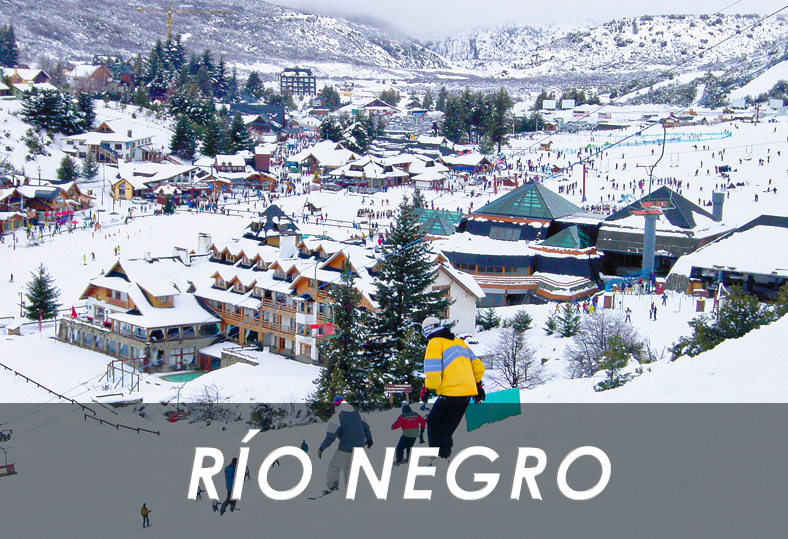
<style>
.page{position:relative;width:788px;height:539px}
.page>*{position:absolute;margin:0}
.t1{font:72.9px "CenturyGothic-Bold";letter-spacing:0.05em;color:#ffffff;font-style:italic}
</style>
<div class="page">
<p class="t1" style="left:185px;top:429px;width:426px;height:73px">RÍO NEGRO</p>
</div>
